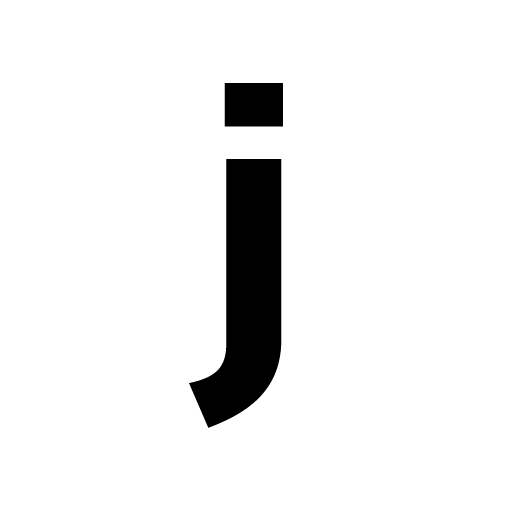
<style>
.page{position:relative;width:512px;height:512px;background:#ffffff}
.page>*{position:absolute;margin:0}
.t1{font:400px "Colaborate-Bold";color:#000000}
</style>
<div class="page">
<p class="t1" style="left:189px;top:83px;width:94px;height:345px">j</p>
</div>
